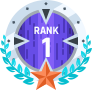
<style>
.page{position:relative;width:92px;height:90px;background:#ffffff}
.page>*{position:absolute;margin:0}
.t1{font:11px "Rajdhani-Bold";color:#ffffff}
.t2{font:30px "Rajdhani-Bold";color:#ffffff}
</style>
<div class="page">
<p class="t1" style="left:34px;top:26px;width:25px;height:8px">RANK</p>
<p class="t2" style="left:42px;top:37px;width:8px;height:20px">1</p>
</div>
